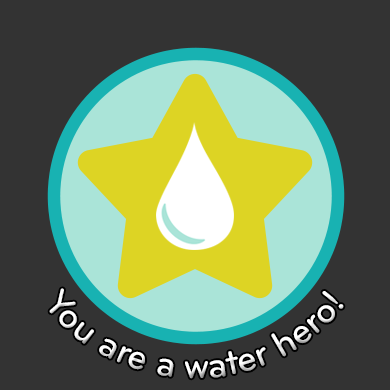
<style>
.page{position:relative;width:390px;height:390px;background:#333333}
.page>*{position:absolute;margin:0}
.t1{font:37.5px "Bryant-Medium";color:#ffffff}
</style>
<div class="page">
<p class="t1" style="left:49px;top:288px;width:295px;height:91px">You are a water hero!</p>
</div>
